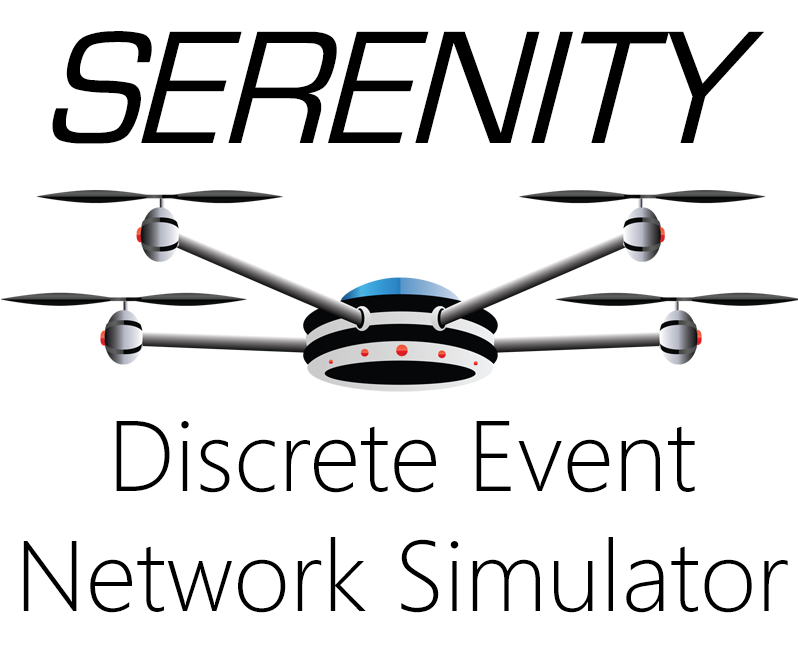
<style>
.page{position:relative;width:798px;height:650px;background:#ffffff}
.page>*{position:absolute;margin:0}
.t1{font:166.7px "EurostileObl-Normal";color:#000000}
.t2{font:100px "SegoeUI-Light";color:#000000}
</style>
<div class="page">
<p class="t1" style="left:52px;top:31px;width:712px;height:113px">SERENITY</p>
<p class="t2" style="left:23px;top:421px;width:765px;height:192px;text-align:center">Discrete Event<br>Network Simulator</p>
</div>
